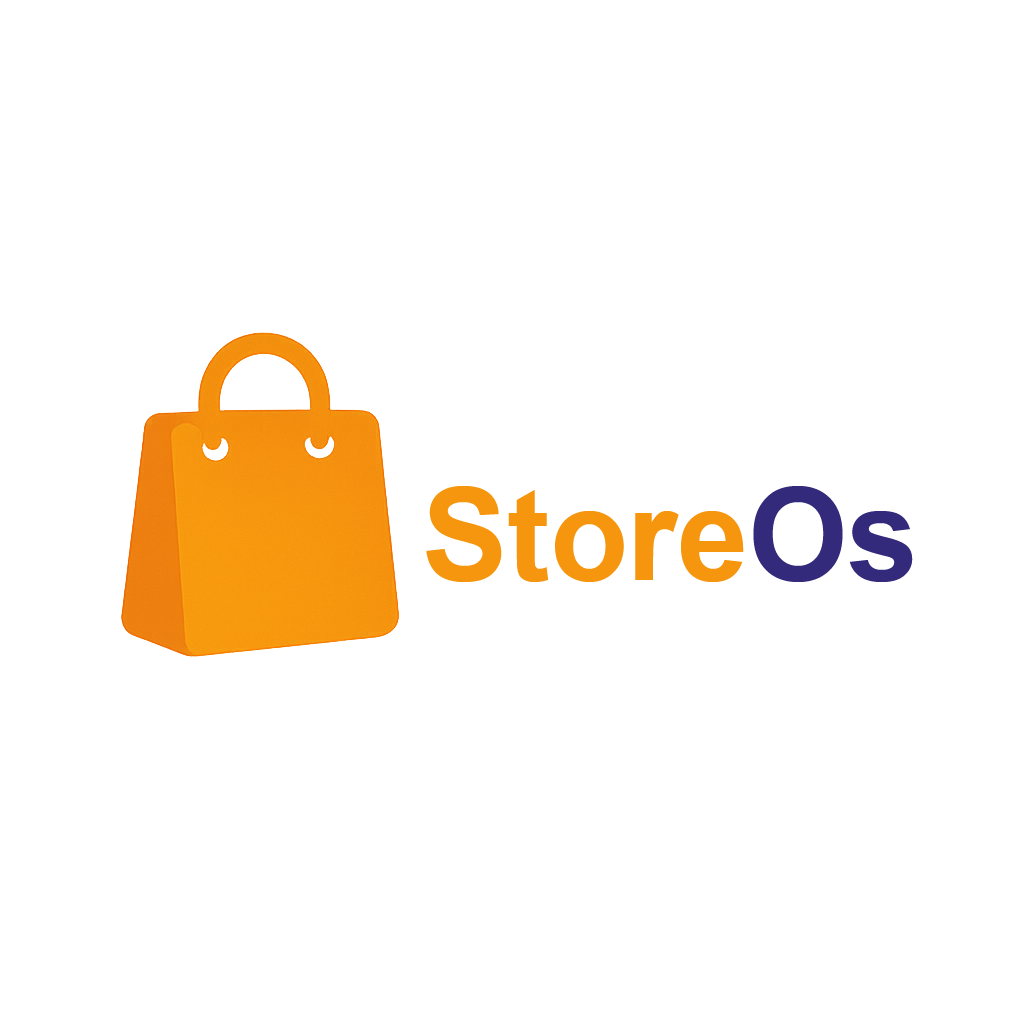
<style>
.page{position:relative;width:1024px;height:1024px;background:#ffffff}
.page>*{position:absolute;margin:0}
.t1{font:127.5px "Arial-BoldMT";color:#f6960e}
.t2{font:127.5px "Arial-BoldMT";color:#332a7c}
</style>
<div class="page">
<p class="t1" style="left:426px;top:486px;width:487px;height:96px">Store<span class="t2">Os</span></p>
</div>
